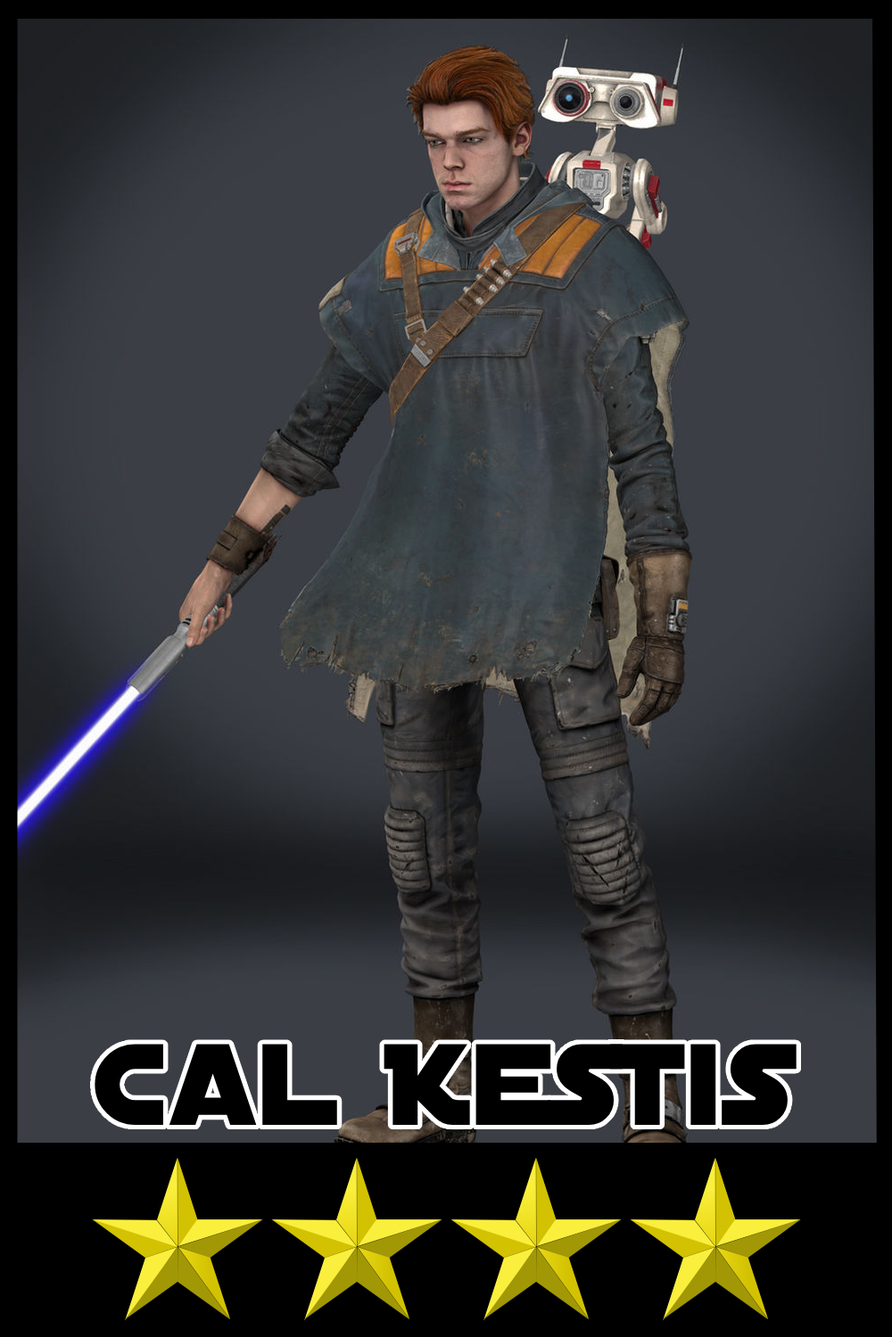
<style>
.page{position:relative;width:892px;height:1337px}
.page>*{position:absolute;margin:0}
.t1{font:124.1px "DistantGalaxy";color:#000000}
</style>
<div class="page">
<p class="t1" style="left:95px;top:1044px;width:701px;height:81px">Cal Kestis</p>
</div>
